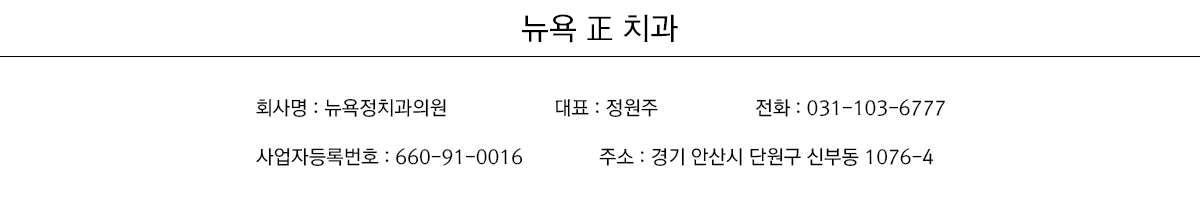
<style>
.page{position:relative;width:1200px;height:200px;background:#ffffff}
.page>*{position:absolute;margin:0}
.t1{font:30.7px "RixGoM";color:#000000}
.t2{font:19.5px "RixGoM";color:#000000}
</style>
<div class="page">
<p class="t1" style="left:522px;top:14px;width:156px;height:29px">뉴욕 正 치과</p>
<p class="t2" style="left:256px;top:98px;width:190px;height:20px">회사명 : 뉴욕정치과의원</p>
<p class="t2" style="left:555px;top:99px;width:103px;height:19px">대표 : 정원주</p>
<p class="t2" style="left:755px;top:99px;width:190px;height:18px">전화 : 031-103-6777</p>
<p class="t2" style="left:256px;top:148px;width:267px;height:19px">사업자등록번호 : 660-91-0016</p>
<p class="t2" style="left:599px;top:148px;width:335px;height:19px">주소 : 경기 안산시 단원구 신부동 1076-4</p>
</div>
